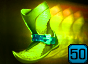
<style>
.page{position:relative;width:88px;height:64px}
.page>*{position:absolute;margin:0}
.t1{font:14px "EnigmaticUnicode";color:#000000}
</style>
<div class="page">
<p class="t1" style="left:70px;top:48px;width:16px;height:12px">50</p>
</div>
